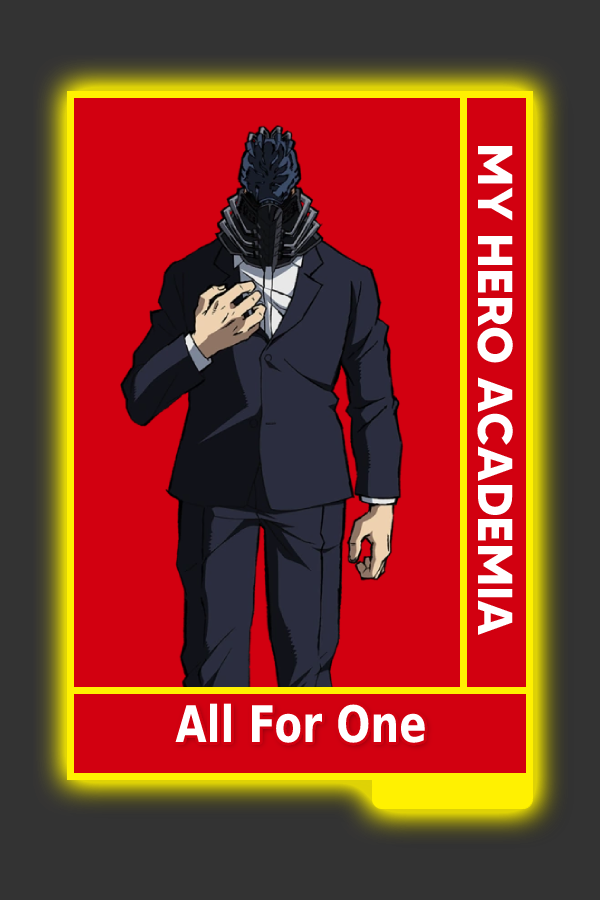
<style>
.page{position:relative;width:600px;height:900px;background:#d20010}
.page>*{position:absolute;margin:0}
.t1{font:48.8px "MADETOMMY-Bold";color:#ffffff}
.t2{font:50.5px "MADETOMMY-Bold";color:#ffffff;scale:0.8 1}
</style>
<div class="page">
<p class="t1" style="left:477px;top:146px;width:36px;height:489px;rotate:90deg">MY HERO ACADEMIA</p>
<p class="t2" style="left:175px;top:703px;width:250px;height:40px">All For One</p>
</div>
